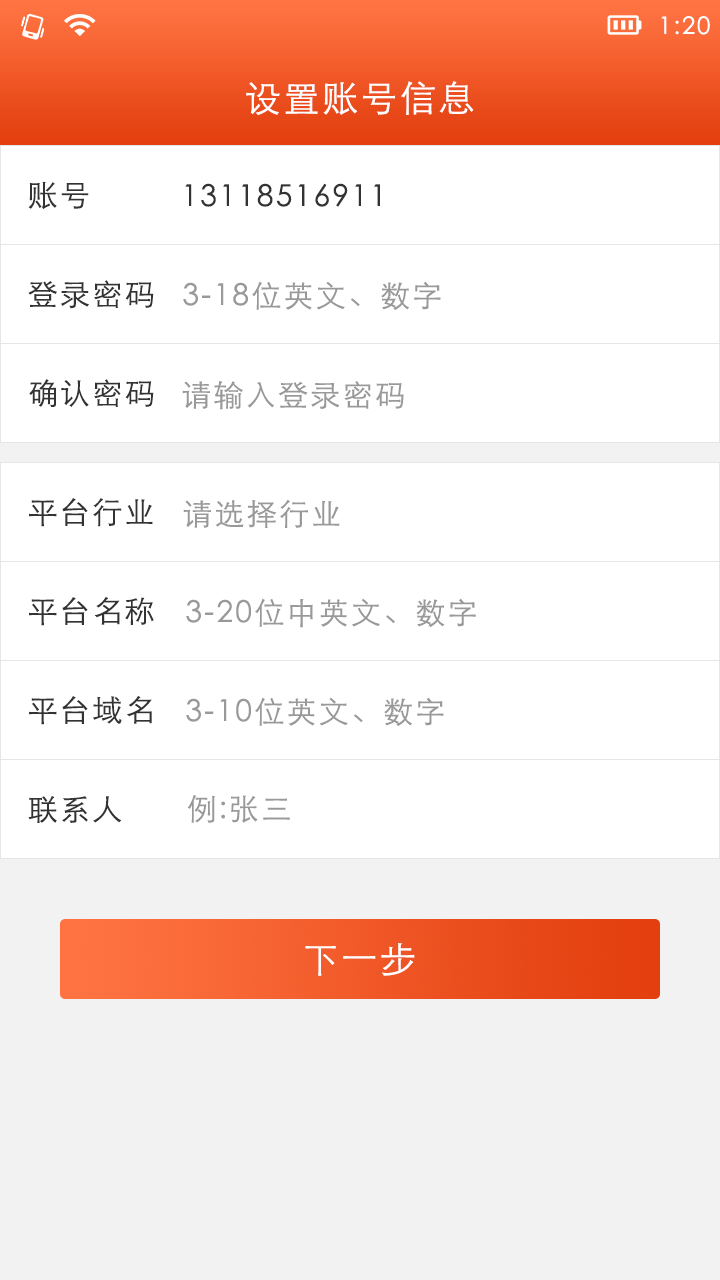
<style>
.page{position:relative;width:720px;height:1280px;background:#ffffff}
.page>*{position:absolute;margin:0}
.t1{font:24px "STXihei";letter-spacing:0.075em;color:#ffffff}
.t2{font:36px "STHeitiSC-Light";letter-spacing:0.075em;color:#ffffff}
.t3{font:30px "STHeitiSC-Light";letter-spacing:0.075em;color:#333333}
.t4{font:30px "STHeitiSC-Light";letter-spacing:0.075em;color:#999999;text-transform:uppercase}
</style>
<div class="page">
<p class="t1" style="left:661px;top:16px;width:49px;height:19px">1:20</p>
<p class="t2" style="left:246px;top:81px;width:228px;height:34px">设置账号信息</p>
<p class="t3" style="left:28px;top:181px;width:61px;height:28px">账号</p>
<p class="t3" style="left:185px;top:183px;width:195px;height:24px">13118516911</p>
<p class="t3" style="left:28px;top:280px;width:126px;height:29px">登录密码</p>
<p class="t4" style="left:183px;top:281px;width:258px;height:29px">3-18位英文、数字</p>
<p class="t3" style="left:29px;top:379px;width:125px;height:28px">确认密码</p>
<p class="t4" style="left:182px;top:381px;width:222px;height:29px">请输入登录密码</p>
<p class="t3" style="left:29px;top:498px;width:124px;height:29px">平台行业</p>
<p class="t4" style="left:183px;top:499px;width:157px;height:29px">请选择行业</p>
<p class="t3" style="left:29px;top:596px;width:125px;height:30px">平台名称</p>
<p class="t4" style="left:186px;top:598px;width:290px;height:30px">3-20位中英文、数字</p>
<p class="t3" style="left:29px;top:695px;width:123px;height:30px">平台域名</p>
<p class="t4" style="left:186px;top:697px;width:258px;height:29px">3-10位英文、数字</p>
<p class="t3" style="left:28px;top:795px;width:94px;height:28px">联系人</p>
<p class="t4" style="left:187px;top:795px;width:103px;height:28px">例:张三</p>
<p class="t2" style="left:305px;top:943px;width:110px;height:33px">下一步</p>
</div>
